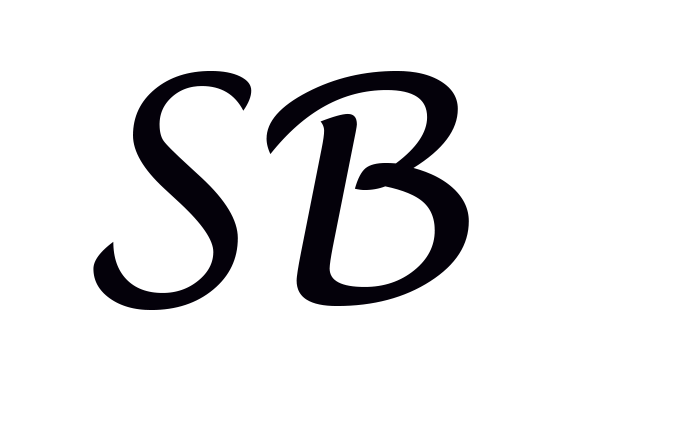
<style>
.page{position:relative;width:683px;height:440px;background:#ffffff}
.page>*{position:absolute;margin:0}
.t1{font:300px "LucidaHandwriting-Italic";color:#04010a}
</style>
<div class="page">
<p class="t1" style="left:93px;top:71px;width:376px;height:239px">SB</p>
</div>
